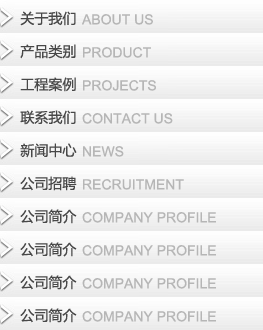
<style>
.page{position:relative;width:263px;height:330px}
.page>*{position:absolute;margin:0}
.t1{font:14px "MicrosoftYaHei";color:#484848}
.t2{font:14px "ArialMT";color:#b6b6b6;text-transform:uppercase}
</style>
<div class="page">
<p class="t1" style="left:20px;top:11px;width:56px;height:15px">关于我们</p>
<p class="t2" style="left:82px;top:14px;width:71px;height:11px">About Us</p>
<p class="t1" style="left:20px;top:44px;width:56px;height:15px">产品类别</p>
<p class="t2" style="left:83px;top:47px;width:68px;height:11px">Product</p>
<p class="t1" style="left:20px;top:77px;width:56px;height:15px">工程案例</p>
<p class="t2" style="left:83px;top:80px;width:73px;height:11px">Projects</p>
<p class="t1" style="left:20px;top:110px;width:56px;height:15px">联系我们</p>
<p class="t2" style="left:82px;top:113px;width:91px;height:11px">Contact Us</p>
<p class="t1" style="left:20px;top:143px;width:57px;height:15px">新闻中心</p>
<p class="t2" style="left:83px;top:146px;width:41px;height:11px">News</p>
<p class="t1" style="left:20px;top:176px;width:57px;height:15px">公司招聘</p>
<p class="t2" style="left:83px;top:179px;width:101px;height:11px">Recruitment</p>
<p class="t1" style="left:20px;top:209px;width:57px;height:15px">公司简介</p>
<p class="t2" style="left:82px;top:212px;width:134px;height:11px">Company Profile</p>
<p class="t1" style="left:20px;top:242px;width:57px;height:15px">公司简介</p>
<p class="t2" style="left:82px;top:245px;width:134px;height:11px">Company Profile</p>
<p class="t1" style="left:20px;top:275px;width:57px;height:15px">公司简介</p>
<p class="t2" style="left:82px;top:278px;width:134px;height:11px">Company Profile</p>
<p class="t1" style="left:20px;top:308px;width:57px;height:15px">公司简介</p>
<p class="t2" style="left:82px;top:311px;width:134px;height:11px">Company Profile</p>
</div>
